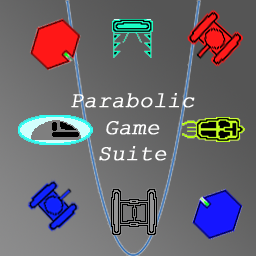
<style>
.page{position:relative;width:256px;height:256px}
.page>*{position:absolute;margin:0}
.t1{font:22.1px "CourierNewPSMT";color:#ffffff;font-weight:bold;font-style:italic}
</style>
<div class="page">
<p class="t1" style="left:71px;top:93px;width:124px;height:68px;text-align:center">Parabolic<br>Game<br>Suite</p>
</div>
